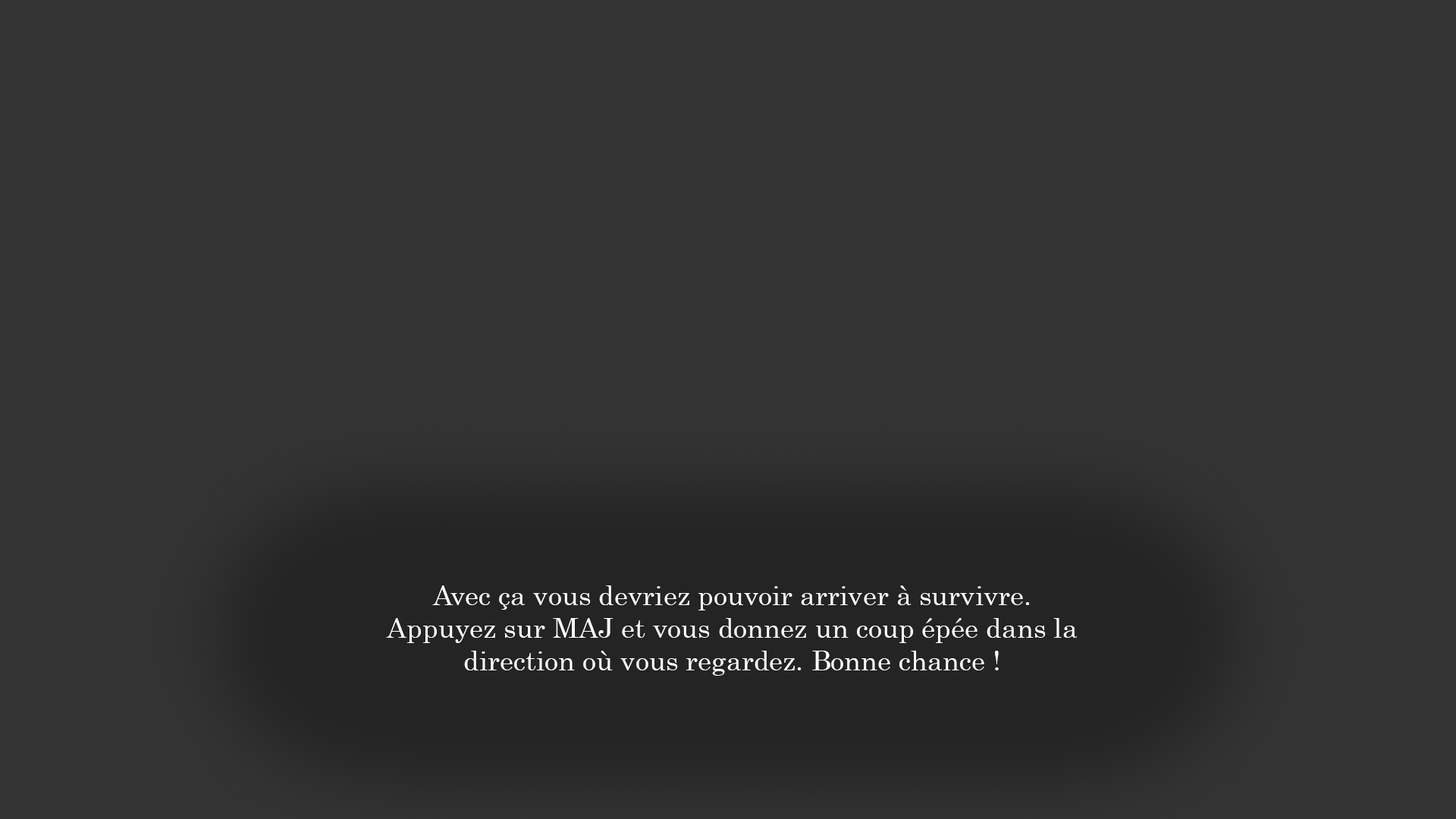
<style>
.page{position:relative;width:1456px;height:819px;background:#333333}
.page>*{position:absolute;margin:0}
.t1{font:27.3px "Century";color:#ffffff}
</style>
<div class="page">
<p class="t1" style="left:386px;top:585px;width:691px;height:91px;text-align:center">Avec ça vous devriez pouvoir arriver à survivre.<br>Appuyez sur MAJ et vous donnez un coup épée dans la<br>direction où vous regardez. Bonne chance !</p>
</div>
